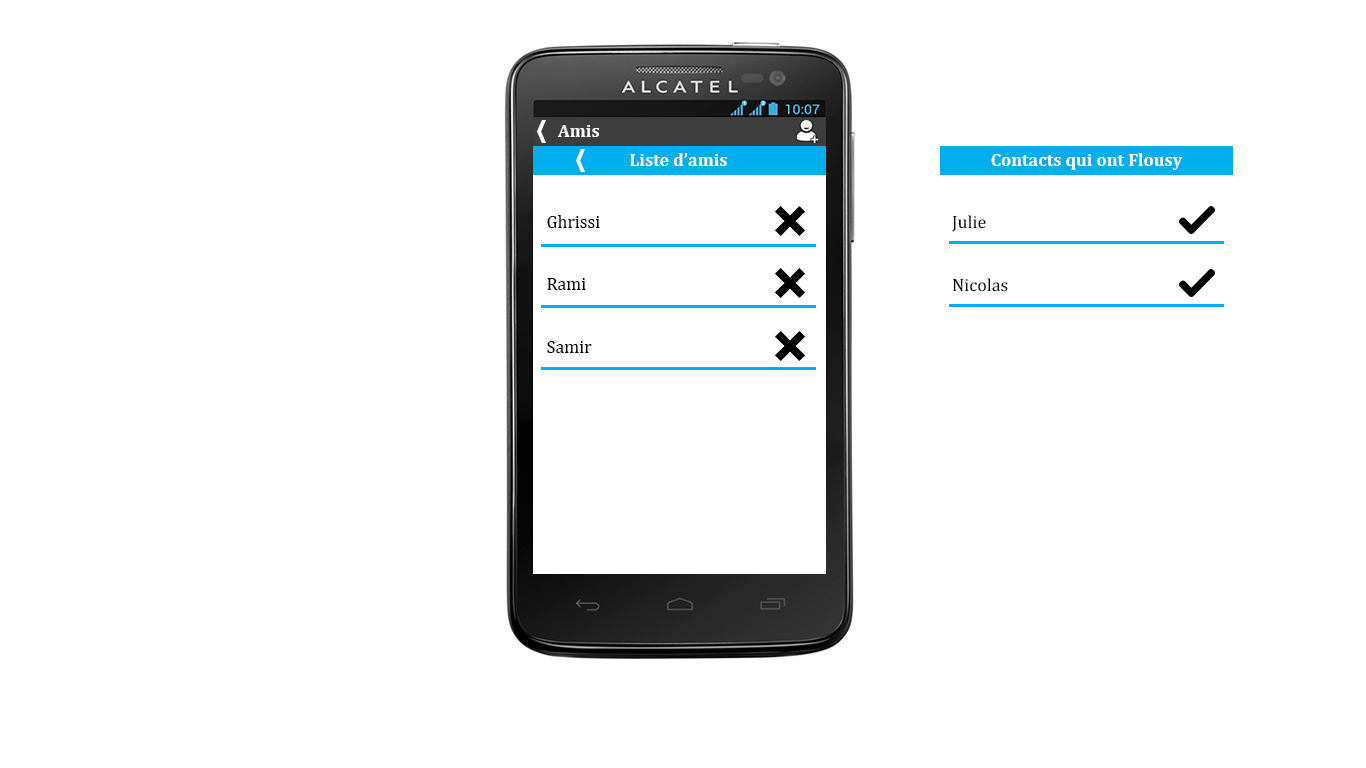
<style>
.page{position:relative;width:1366px;height:768px;background:#ffffff}
.page>*{position:absolute;margin:0}
.t1{font:18px "Cambria-Bold";color:#ffffff}
.t2{font:18px "Cambria";color:#000000}
</style>
<div class="page">
<p class="t1" style="left:557px;top:125px;width:42px;height:12px">Amis</p>
<p class="t1" style="left:630px;top:153px;width:97px;height:13px">Liste d’amis</p>
<p class="t1" style="left:991px;top:153px;width:192px;height:17px">Contacts qui ont Flousy</p>
<p class="t2" style="left:547px;top:215px;width:53px;height:13px">Ghrissi</p>
<p class="t2" style="left:952px;top:215px;width:34px;height:17px">Julie</p>
<p class="t2" style="left:547px;top:278px;width:39px;height:12px">Rami</p>
<p class="t2" style="left:953px;top:278px;width:55px;height:14px">Nicolas</p>
<p class="t2" style="left:547px;top:341px;width:45px;height:12px">Samir</p>
</div>
